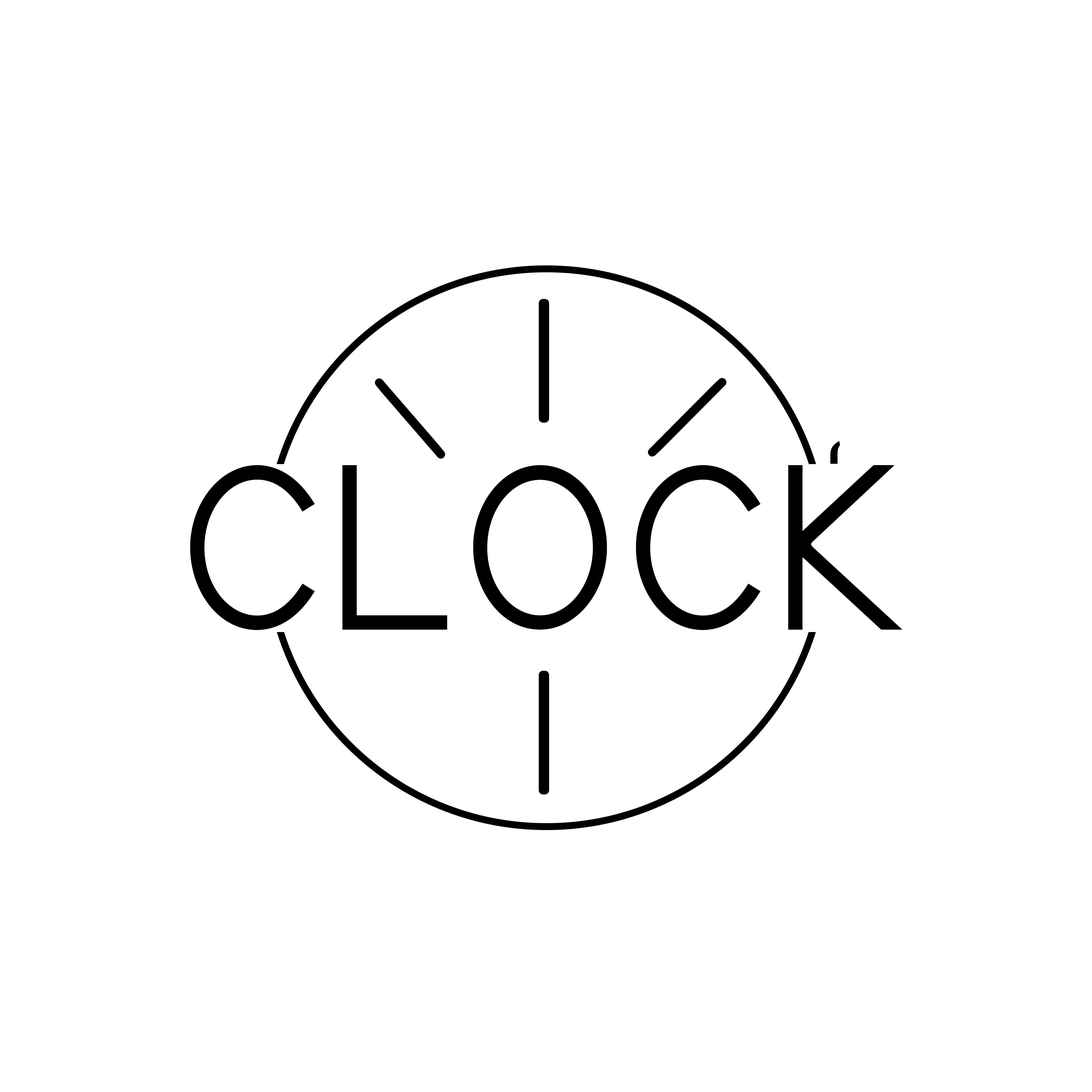
<style>
.page{position:relative;width:1092px;height:1092px;background:#ffffff}
.page>*{position:absolute;margin:0}
.t1{font:103.2px "Kirvy-Regular";color:#000000}
.t2{font:204.6px "Kirvy-Regular";color:#000000}
</style>
<div class="page">
<p class="t1" style="left:830px;top:441px;width:10px;height:23px">‘</p>
<p class="t2" style="left:190px;top:465px;width:713px;height:165px">CLOCK</p>
</div>
